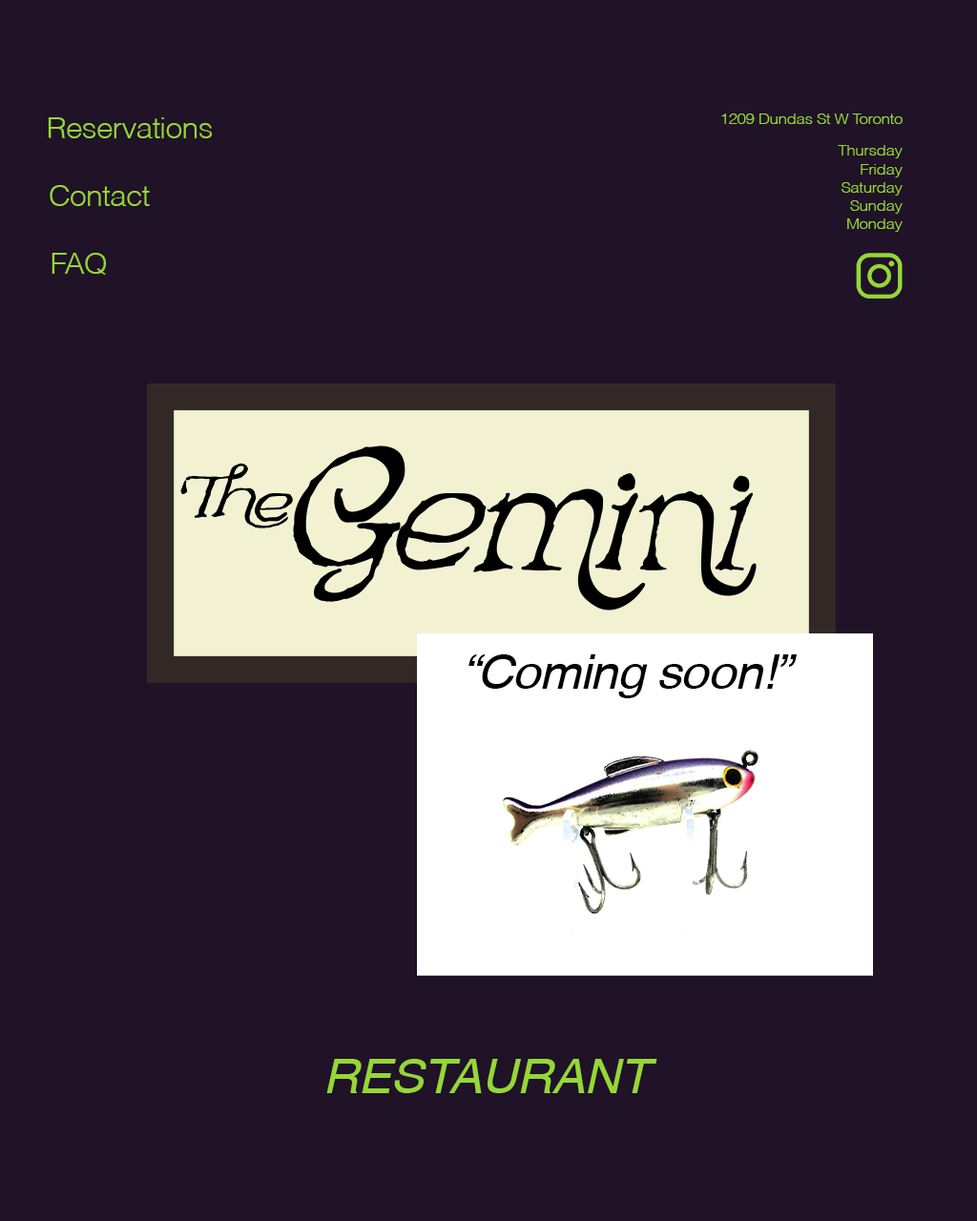
<style>
.page{position:relative;width:977px;height:1221px;background:#201227}
.page>*{position:absolute;margin:0}
.t1{font:15.3px "Helvetica-Light";letter-spacing:-0.02em;color:#95d736;scale:1.05 1}
.t2{font:28.6px "Helvetica-Light";letter-spacing:-0.02em;color:#95d736;scale:1.05 1}
.t3{font:47.7px "Helvetica-Oblique";letter-spacing:-0.02em;color:#000000;scale:1.05 1}
.t4{font:47.7px "Helvetica-Oblique";letter-spacing:-0.02em;color:#95d736;scale:1.05 1}
</style>
<div class="page">
<p class="t1" style="left:721px;top:114px;width:181px;height:10px">1209 Dundas St W Toronto</p>
<p class="t2" style="left:48px;top:117px;width:165px;height:21px">Reservations</p>
<p class="t1" style="left:837px;top:145px;width:65px;height:87px;text-align:right">Thursday<br>Friday<br>Saturday<br>Sunday<br>Monday</p>
<p class="t2" style="left:50px;top:185px;width:100px;height:21px">Contact</p>
<p class="t2" style="left:52px;top:253px;width:55px;height:22px">FAQ</p>
<p class="t3" style="left:468px;top:654px;width:328px;height:44px">“Coming soon!”</p>
<p class="t4" style="left:326px;top:1059px;width:331px;height:34px">RESTAURANT</p>
</div>
